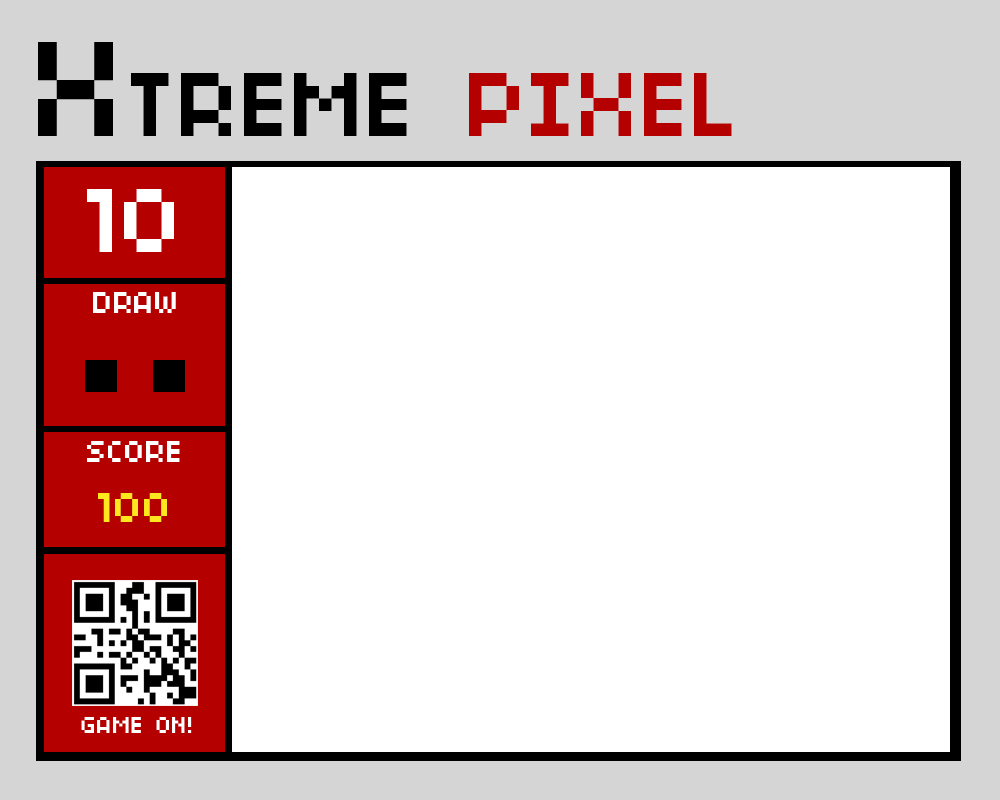
<style>
.page{position:relative;width:1000px;height:800px;background:#ffffff}
.page>*{position:absolute;margin:0}
.t1{font:100px "04b03";color:#000000}
.t2{font:150px "04b03";color:#000000}
.t3{font:100px "04b03";color:#b50000}
.t4{font:100px "04b03";color:#ffffff}
.t5{font:33.3px "04b03";color:#ffffff}
.t6{font:45.8px "04b03";color:#ffe71f}
.t7{font:25px "04b03";color:#ffffff}
</style>
<div class="page">
<p class="t1" style="left:38px;top:42px;width:694px;height:94px"><span class="t2">X</span>TREME <span class="t3">PIXEL</span></p>
<p class="t4" style="left:87px;top:189px;width:87px;height:63px">10</p>
<p class="t5" style="left:93px;top:292px;width:83px;height:21px">DRAW</p>
<p class="t5" style="left:87px;top:441px;width:93px;height:21px">SCORE</p>
<p class="t6" style="left:98px;top:493px;width:69px;height:29px">100</p>
<p class="t7" style="left:81px;top:717px;width:111px;height:16px">GAME ON!</p>
</div>
